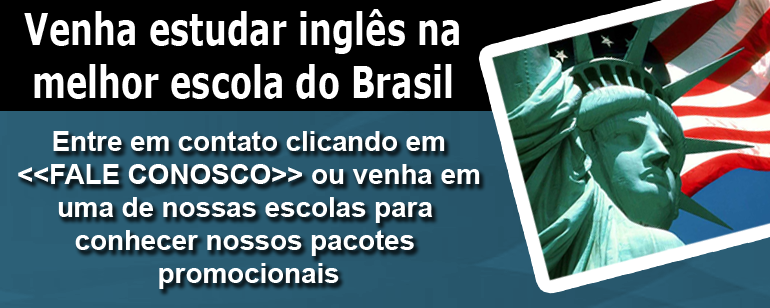
<style>
.page{position:relative;width:770px;height:308px}
.page>*{position:absolute;margin:0}
.t1{font:44.1px "Verdana-Bold";color:#ffffff;scale:0.73 1}
.t2{font:27.5px "Arial-BoldMT";color:#ffffff}
</style>
<div class="page">
<p class="t1" style="left:24px;top:9px;width:435px;height:90px;text-align:center">Venha estudar inglês na<br>melhor escola do Brasil</p>
<p class="t2" style="left:18px;top:131px;width:462px;height:158px;text-align:center">Entre em contato clicando em<br>&lt;&lt;FALE CONOSCO&gt;&gt; ou venha em<br>uma de nossas escolas para <br>conhecer nossos pacotes <br>promocionais</p>
</div>
